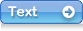
<style>
.page{position:relative;width:83px;height:31px}
.page>*{position:absolute;margin:0}
.t1{font:14px "ArialRoundedMTBold";color:#ffffff}
</style>
<div class="page">
<p class="t1" style="left:8px;top:6px;width:30px;height:11px">Text</p>
</div>
